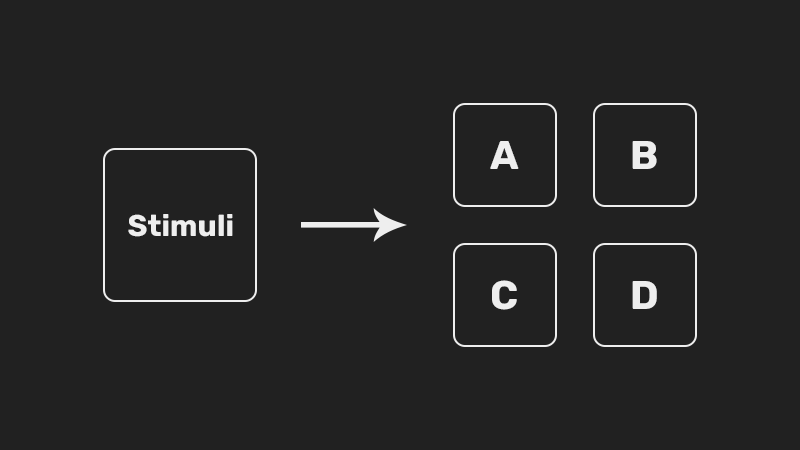
<style>
.page{position:relative;width:800px;height:450px;background:#212121}
.page>*{position:absolute;margin:0}
.t1{font:40px "Rubik-Bold";color:#eeeeee}
.t2{font:30px "Rubik-Bold";color:#eeeeee}
</style>
<div class="page">
<p class="t1" style="left:490px;top:141px;width:29px;height:28px">A</p>
<p class="t1" style="left:632px;top:141px;width:25px;height:28px">B</p>
<p class="t2" style="left:128px;top:214px;width:105px;height:23px">Stimuli</p>
<p class="t1" style="left:492px;top:280px;width:25px;height:30px">C</p>
<p class="t1" style="left:632px;top:281px;width:25px;height:28px">D</p>
</div>
